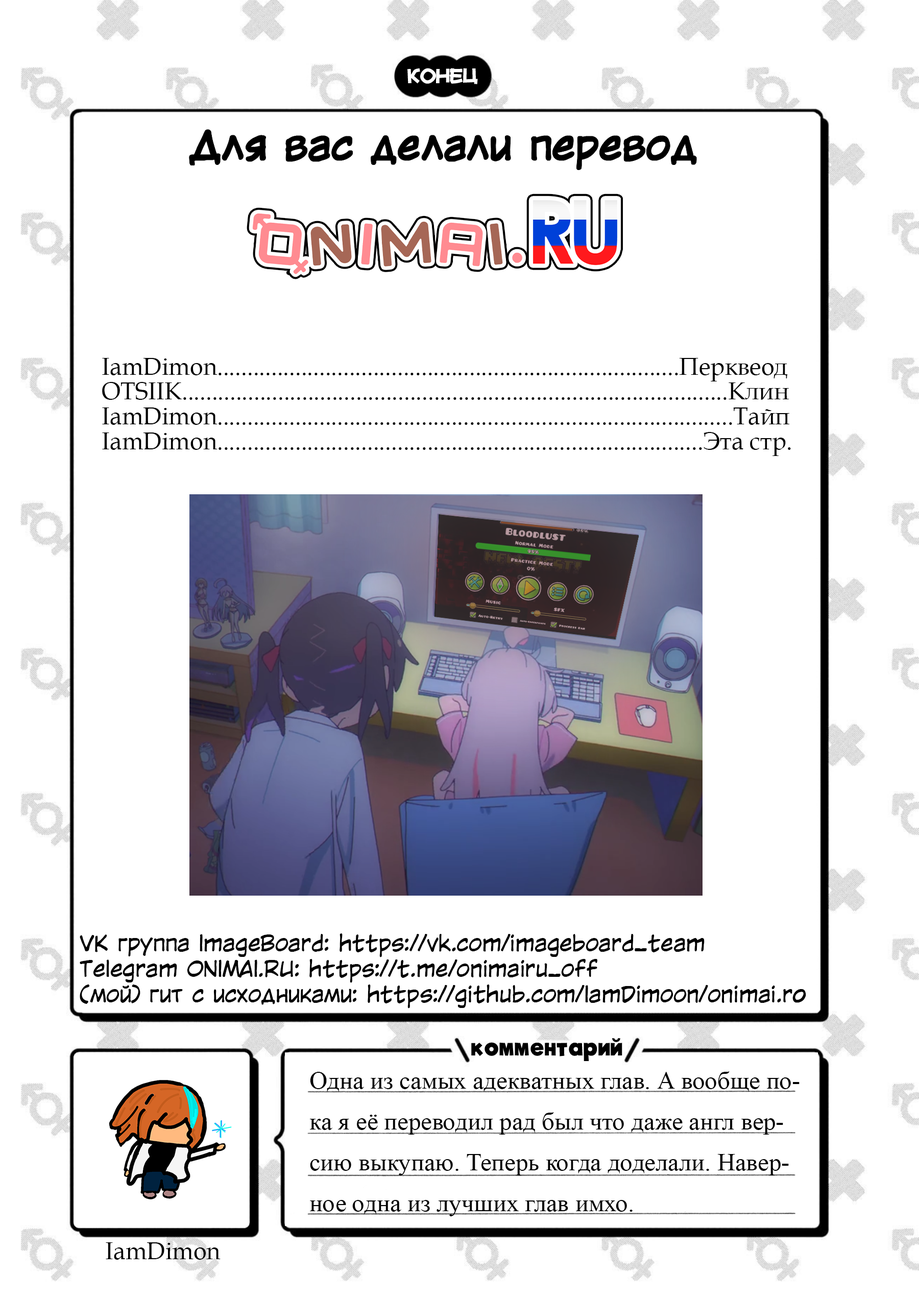
<style>
.page{position:relative;width:919px;height:1298px;background:#ffffff}
.page>*{position:absolute;margin:0}
.t1{font:17px "Mauryssel-Bold";color:#ffffff}
.t2{font:38.3px "KuraiVoice2";color:#000000;font-weight:bold}
.t3{font:24px/24.8px "BookAntiqua";color:#000000}
.t4{font:21.3px/25.5px "KuraiVoice2";color:#000000}
.t5{font:21.3px/34px "MyriadPro-Regular";color:#000000}
.t6{font:63.8px/51px "ADomIno";color:#000000}
.t7{font:21.3px/23.4px "MyriadPro-Regular";color:#000000}
.t8{font:21.3px/25.5px "KuraiVoice2";color:#000000;font-weight:bold}
.t9{font:23.4px "MyFontBold";color:#000000}
.t10{font:24.8px/40.8px "TimesNewRomanPSMT";color:#000000}
.t11{font:24px "BookAntiqua";color:#000000}
</style>
<div class="page">
<p class="t1" style="left:407px;top:68px;width:71px;height:16px">конец</p>
<p class="t2" style="left:189px;top:130px;width:507px;height:40px">Для вас делали перевод</p>
<p class="t3" style="left:102px;top:358px;width:689px;height:98px">IamDimon.............................................................................Перквеод<br>OTSIIK...........................................................................................Клин<br>IamDimon......................................................................................Тайп<br>IamDimon.................................................................................Эта стр.</p>
<p class="t4" style="left:80px;top:933px;width:726px;height:75px"><span class="t5"><br><br><br><br><br><br><br><br><br></span><span class="t6"><br><br>                      <br></span><span class="t5"><br><br></span><span class="t7"><br><br><br><br><br><br><br><br><br><br></span><br>VK группа ImageBoard: https://vk.com/imageboard_team<br>Telegram ONIMAI.RU: https://t.me/onimairu_off<br>(мой) гит с исходниками: https://github.com/IamDimoon/onimai.r<span class="t8">o<br></span><span class="t7"></span></p>
<p class="t9" style="left:471px;top:1038px;width:151px;height:23px">комментарий</p>
<p class="t10" style="left:310px;top:1071px;width:489px;height:145px">Одна из самых адекватных глав. А вообще по-<br>ка я её переводил рад был что даже англ вер-<br>сию выкупаю. Теперь когда доделали. Навер-<br>ное одна из лучших глав имхо.</p>
<p class="t11" style="left:106px;top:1242px;width:115px;height:17px">IamDimon</p>
</div>
